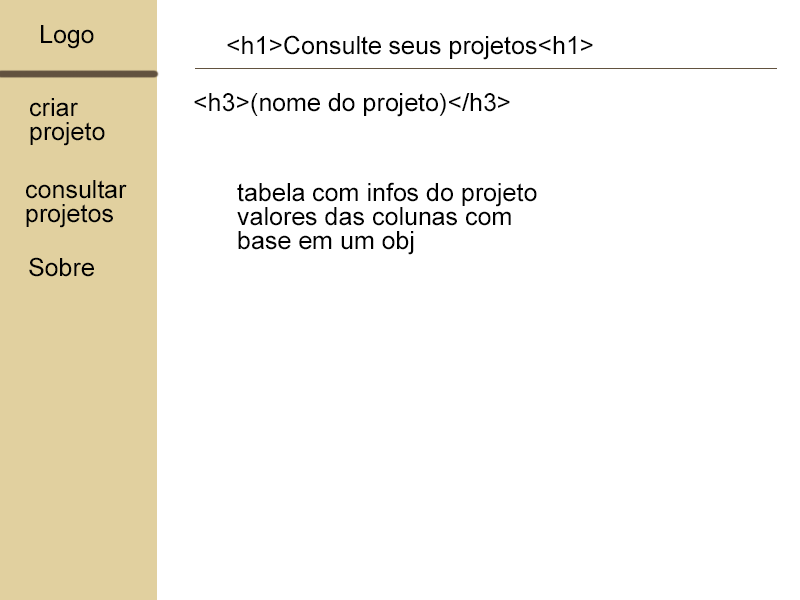
<style>
.page{position:relative;width:800px;height:600px;background:#ffffff}
.page>*{position:absolute;margin:0}
.t1{font:25px "ArialMT";color:#000000}
.t2{font:25px/24.2px "ArialMT";color:#000000}
</style>
<div class="page">
<p class="t1" style="left:41px;top:25px;width:53px;height:24px">Logo</p>
<p class="t1" style="left:227px;top:35px;width:366px;height:25px">&lt;h1&gt;Consulte seus projetos&lt;h1&gt;</p>
<p class="t2" style="left:30px;top:98px;width:75px;height:48px">criar<br>projeto</p>
<p class="t1" style="left:194px;top:93px;width:316px;height:24px">&lt;h3&gt;(nome do projeto)&lt;/h3&gt;</p>
<p class="t2" style="left:26px;top:180px;width:101px;height:48px">consultar<br>projetos</p>
<p class="t2" style="left:237px;top:182px;width:300px;height:73px">tabela com infos do projeto<br>valores das colunas com<br>base em um obj</p>
<p class="t1" style="left:29px;top:257px;width:65px;height:20px">Sobre</p>
</div>
